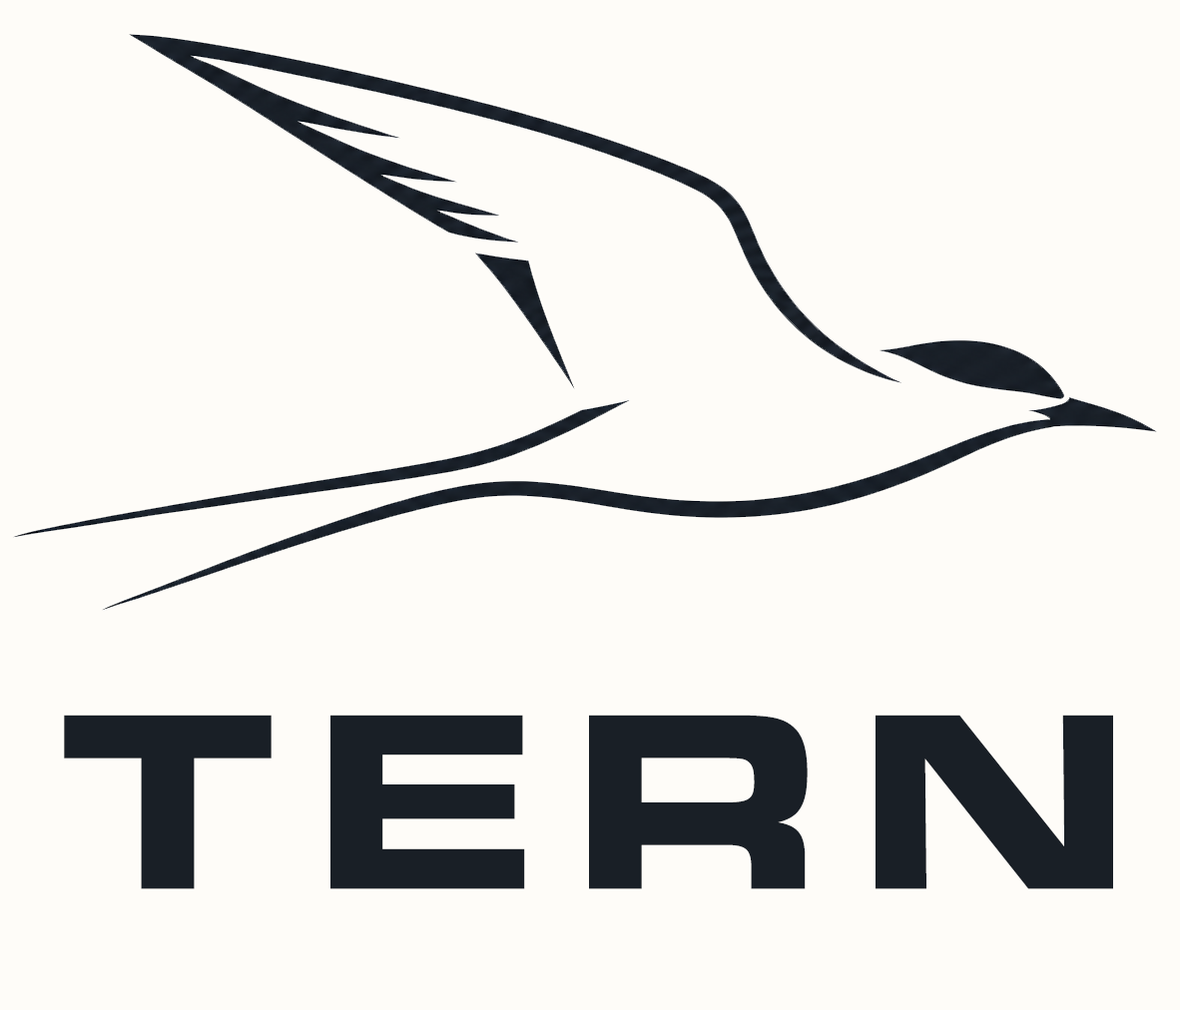
<style>
.page{position:relative;width:1180px;height:1010px;background:#fefcf8}
.page>*{position:absolute;margin:0}
.t1{font:259.6px "EurostileExt-Bla";letter-spacing:0.1em;color:#191f26}
</style>
<div class="page">
<p class="t1" style="left:64px;top:715px;width:1049px;height:175px">TERN</p>
</div>
